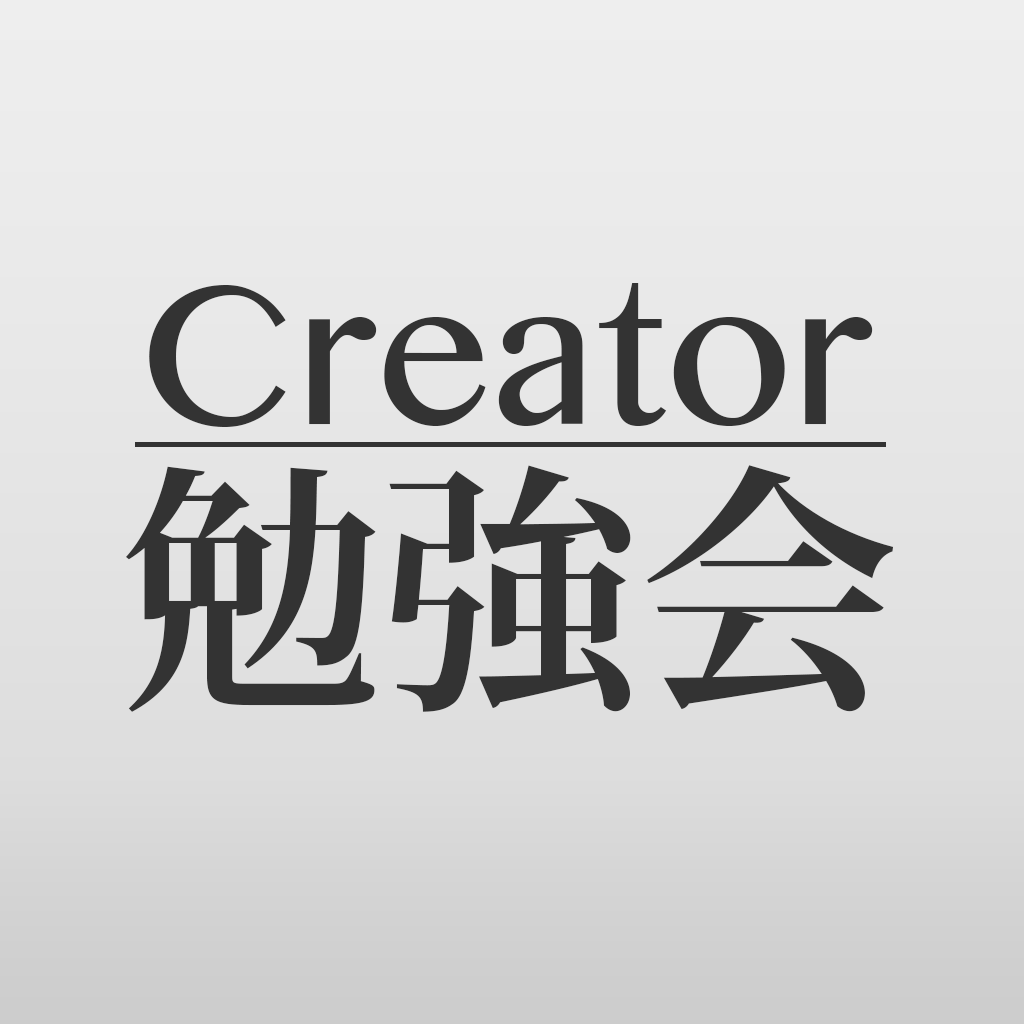
<style>
.page{position:relative;width:1024px;height:1024px}
.page>*{position:absolute;margin:0}
.t1{font:200px "OriyaMN";color:#333333}
.t2{font:260px "KozMinPr6N-Bold";color:#333333}
</style>
<div class="page">
<p class="t1" style="left:149px;top:283px;width:724px;height:144px">Creator</p>
<p class="t2" style="left:126px;top:465px;width:768px;height:247px">勉強会</p>
</div>
